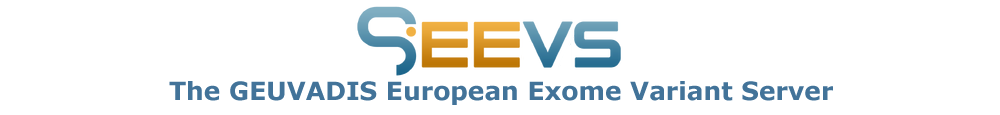
<style>
.page{position:relative;width:1000px;height:115px;background:#ffffff}
.page>*{position:absolute;margin:0}
.t1{font:25px "Verdana-Bold";color:#427399}
</style>
<div class="page">
<p class="t1" style="left:169px;top:81px;width:664px;height:24px">The GEUVADIS European Exome Variant Server</p>
</div>
